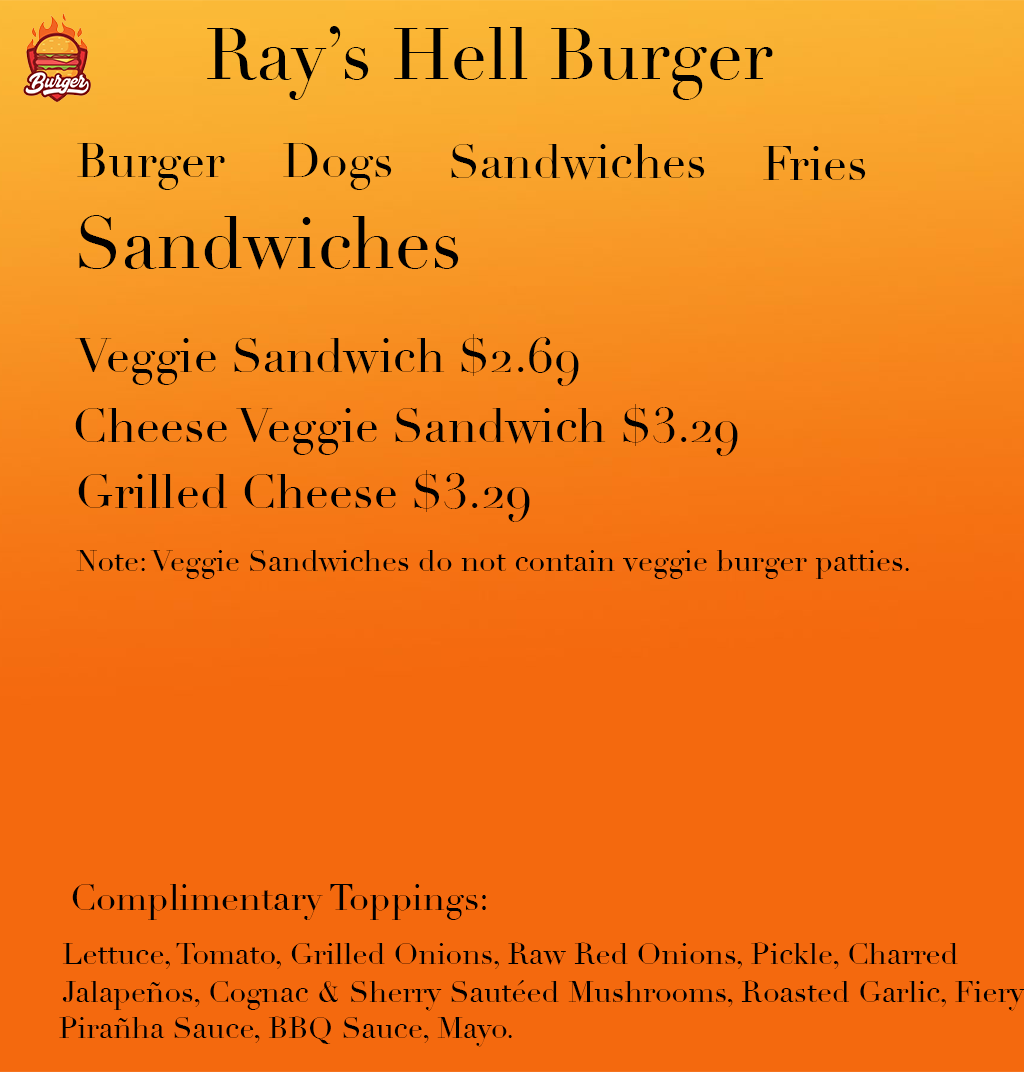
<style>
.page{position:relative;width:1024px;height:1072px;background:#f4690e}
.page>*{position:absolute;margin:0}
.t1{font:72px "Didot";color:#000000}
.t2{font:48px "Didot";color:#000000}
.t3{font:30px "Didot";color:#000000}
.t4{font:36px "Didot";color:#000000}
</style>
<div class="page">
<p class="t1" style="left:207px;top:26px;width:566px;height:74px">Ray’s Hell Burger</p>
<p class="t2" style="left:77px;top:143px;width:148px;height:47px">Burger</p>
<p class="t2" style="left:283px;top:143px;width:109px;height:47px">Dogs</p>
<p class="t2" style="left:451px;top:144px;width:254px;height:36px">Sandwiches</p>
<p class="t2" style="left:763px;top:146px;width:103px;height:34px">Fries</p>
<p class="t1" style="left:79px;top:215px;width:380px;height:55px">Sandwiches</p>
<p class="t2" style="left:75px;top:334px;width:504px;height:52px">Veggie Sandwich $2.69</p>
<p class="t2" style="left:75px;top:404px;width:663px;height:52px">Cheese Veggie Sandwich $3.29</p>
<p class="t2" style="left:78px;top:470px;width:452px;height:52px">Grilled Cheese $3.29</p>
<p class="t3" style="left:76px;top:550px;width:833px;height:29px">Note: Veggie Sandwiches do not contain veggie burger patties.</p>
<p class="t4" style="left:72px;top:884px;width:414px;height:36px">Complimentary Toppings:</p>
<p class="t3" style="left:62px;top:942px;width:896px;height:27px">Lettuce, Tomato, Grilled Onions, Raw Red Onions, Pickle, Charred</p>
<p class="t3" style="left:62px;top:980px;width:963px;height:31px">Jalapeños, Cognac &amp; Sherry Sautéed Mushrooms, Roasted Garlic, Fiery</p>
<p class="t3" style="left:59px;top:1016px;width:453px;height:31px">Pirañha Sauce, BBQ Sauce, Mayo.</p>
</div>
